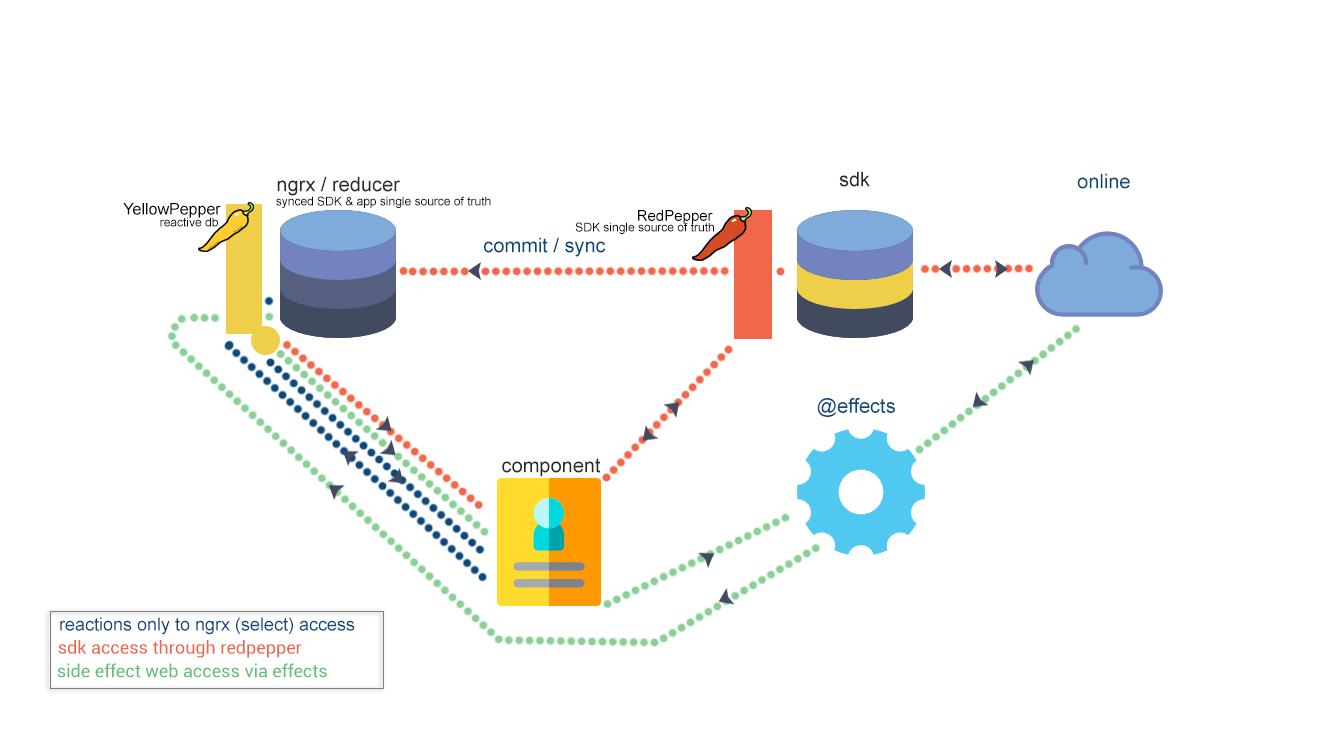
<style>
.page{position:relative;width:1330px;height:735px;background:#ffffff}
.page>*{position:absolute;margin:0}
.t1{font:20px "ArialMT";color:#292929}
.t2{font:20px "ArialMT";color:#0e4879}
.t3{font:12px "ArialMT";color:#000000}
.t4{font:16px "ArialMT";color:#000000}
.t5{font:15px "ArialMT";color:#000000}
.t6{font:18px "ArialMT";color:#0e4879}
.t7{font:18px "Roboto-Regular";color:#ee6448}
.t8{font:18px "Roboto-Regular";color:#61be72}
</style>
<div class="page">
<p class="t1" style="left:839px;top:171px;width:31px;height:16px">sdk</p>
<p class="t2" style="left:1077px;top:173px;width:53px;height:16px">online</p>
<p class="t1" style="left:277px;top:176px;width:123px;height:20px">ngrx / reducer</p>
<p class="t3" style="left:276px;top:196px;width:215px;height:12px">synced SDK &amp; app single source of truth</p>
<p class="t4" style="left:123px;top:203px;width:98px;height:15px">YellowPepper</p>
<p class="t3" style="left:160px;top:217px;width:58px;height:10px">reactive db</p>
<p class="t3" style="left:575px;top:222px;width:139px;height:12px">SDK single source of truth</p>
<p class="t5" style="left:638px;top:210px;width:75px;height:14px">RedPepper</p>
<p class="t2" style="left:484px;top:237px;width:122px;height:20px">commit / sync</p>
<p class="t2" style="left:817px;top:398px;width:78px;height:19px">@effects</p>
<p class="t1" style="left:502px;top:458px;width:99px;height:19px">component</p>
<p class="t6" style="left:60px;top:617px;width:295px;height:18px">reactions only to ngrx (select) access</p>
<p class="t7" style="left:58px;top:640px;width:244px;height:18px">sdk access through redpepper</p>
<p class="t8" style="left:57px;top:663px;width:270px;height:15px">side effect web access via effects</p>
</div>
